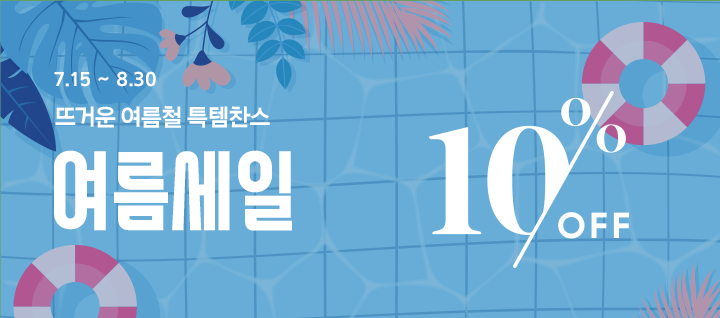
<style>
.page{position:relative;width:720px;height:318px;background:#67add7}
.page>*{position:absolute;margin:0}
.t1{font:20px "Arita-dotum-Bold_TTF";color:#ffffff}
.t2{font:24px "Arita-dotum-Bold_TTF";letter-spacing:-0.06em;color:#ffffff}
.t3{font:100px "SwaggerTTF";color:#ffffff}
</style>
<div class="page">
<p class="t1" style="left:54px;top:71px;width:102px;height:16px">7.15 ~ 8.30</p>
<p class="t2" style="left:55px;top:105px;width:215px;height:23px">뜨거운 여름철 특템찬스</p>
<p class="t3" style="left:54px;top:150px;width:238px;height:81px">여름세일</p>
</div>
